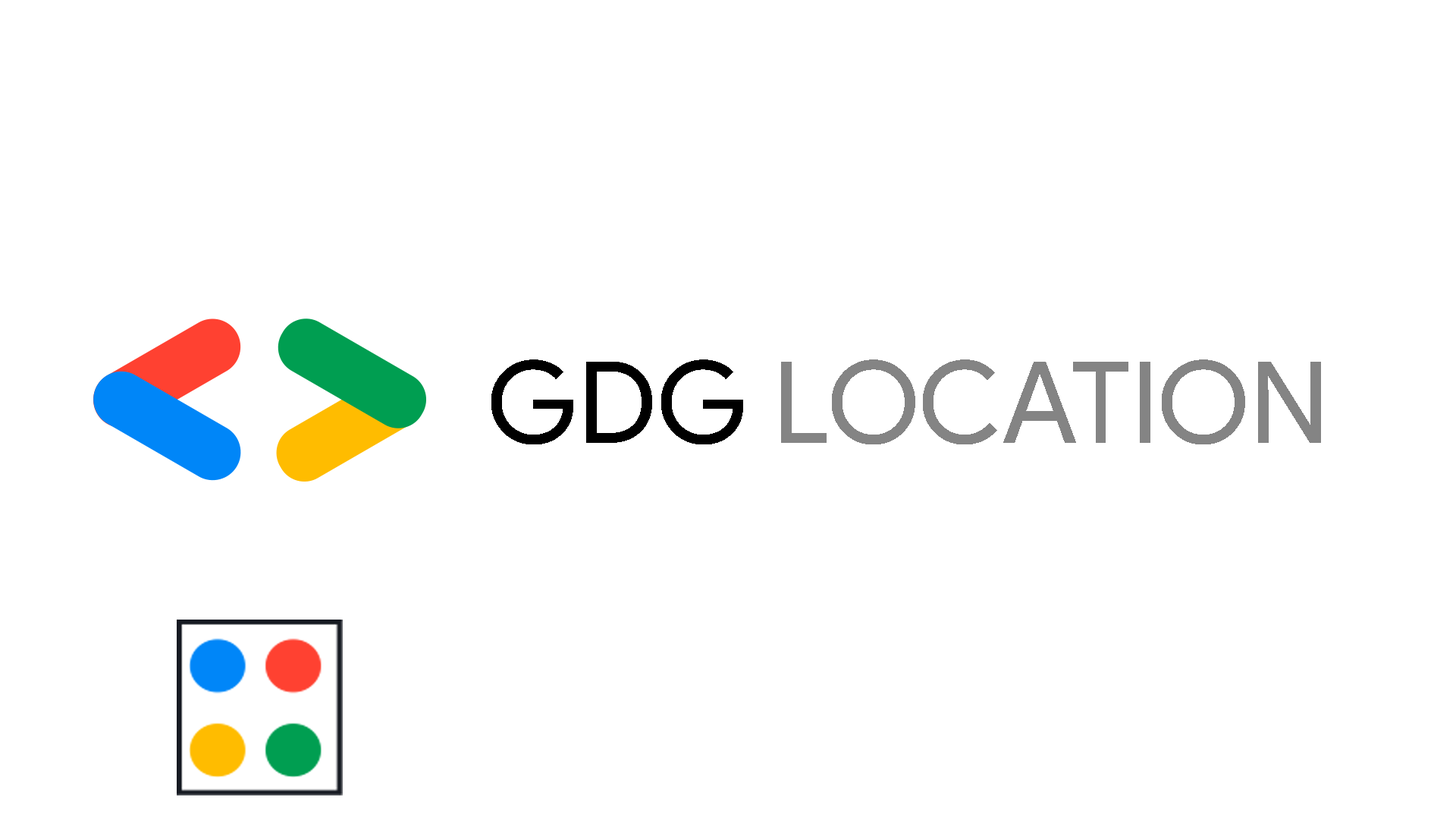
<style>
.page{position:relative;width:1456px;height:819px;background:#ffffff}
.page>*{position:absolute;margin:0}
.t1{font:113.7px "ProductSans-Regular";color:#848484}
.t2{font:113.7px "ProductSans-Regular";color:#000000}
</style>
<div class="page">
<p class="t1" style="left:491px;top:359px;width:830px;height:85px"><span class="t2">GDG </span>LOCATION</p>
</div>
